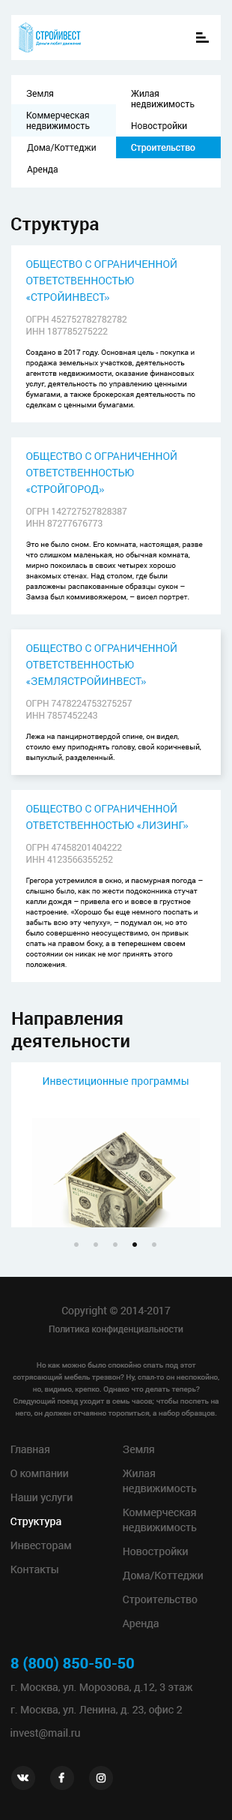
<style>
.page{position:relative;width:232px;height:1820px;background:#ffffff}
.page>*{position:absolute;margin:0}
.t1{font:9px "Roboto-Regular";color:#131313}
.t2{font:9px/10.5px "Roboto-Regular";color:#131313}
.t3{font:9px "Roboto-Regular";color:#ffffff}
.t4{font:18px "Roboto-Bold";color:#131313}
.t5{font:10.5px/16.5px "Roboto-Regular";color:#009adf;text-transform:uppercase}
.t6{font:9px/12px "Roboto-Regular";color:#a6a6a6}
.t7{font:7.5px/10.5px "Roboto-Regular";color:#131313}
.t8{font:18px/22.5px "Roboto-Bold";color:#131313}
.t9{font:10.5px "Roboto-Regular";color:#009adf}
.t10{font:10.5px "Roboto-Regular";color:#666666}
.t11{font:9px "Roboto-Regular";color:#666666}
.t12{font:7.5px/12px "Roboto-Regular";color:#666666}
.t13{font:10.5px/24px "Roboto-Regular";color:#666666}
.t14{font:10.5px/24px "Roboto-Regular";color:#ffffff}
.t15{font:10.5px/15px "Roboto-Regular";color:#666666}
.t16{font:15px "Roboto-Bold";color:#009adf;text-transform:uppercase}
</style>
<div class="page">
<p class="t1" style="left:26px;top:90px;width:27px;height:7px">Земля</p>
<p class="t2" style="left:131px;top:90px;width:64px;height:19px">Жилая<br>недвижимость</p>
<p class="t2" style="left:26px;top:112px;width:64px;height:18px">Коммерческая<br>недвижимость</p>
<p class="t1" style="left:131px;top:122px;width:57px;height:9px">Новостройки</p>
<p class="t1" style="left:27px;top:144px;width:69px;height:8px">Дома/Коттеджи</p>
<p class="t3" style="left:131px;top:144px;width:65px;height:9px">Строительство</p>
<p class="t1" style="left:27px;top:166px;width:31px;height:9px">Аренда</p>
<p class="t4" style="left:11px;top:218px;width:88px;height:16px">Структура</p>
<p class="t5" style="left:26px;top:258px;width:151px;height:43px">Общество с ограниченной ответственностью<br>«Стройинвест»</p>
<p class="t6" style="left:26px;top:316px;width:102px;height:18px">ОГРН 452752782782782<br>ИНН 187785275222</p>
<p class="t7" style="left:26px;top:350px;width:170px;height:59px">Создано в 2017 году. Основная цель - покупка и продажа земельных участков, деятельность агентств недвижимости, оказание финансовых услуг, деятельность по управлению ценными бумагами, а также брокерская деятельность по сделкам с ценными бумагами.</p>
<p class="t5" style="left:26px;top:450px;width:151px;height:44px">Общество с ограниченной ответственностью «СТРОЙгород»</p>
<p class="t6" style="left:26px;top:508px;width:102px;height:18px">ОГРН 142727527828387<br>ИНН 87277676773</p>
<p class="t7" style="left:26px;top:541px;width:177px;height:60px">Это не было сном. Его комната, настоящая, разве что слишком маленькая, но обычная комната, мирно покоилась в своих четырех хорошо знакомых стенах. Над столом, где были разложены распакованные образцы сукон – Замза был коммивояжером, – висел портрет.</p>
<p class="t5" style="left:26px;top:642px;width:151px;height:43px">Общество с ограниченной ответственностью «землястройинвест»</p>
<p class="t6" style="left:26px;top:700px;width:107px;height:18px">ОГРН 7478224753275257<br>ИНН 7857452243</p>
<p class="t7" style="left:26px;top:733px;width:176px;height:28px">Лежа на панцирнотвердой спине, он видел, стоило ему приподнять голову, свой коричневый, выпуклый, разделенный.</p>
<p class="t5" style="left:26px;top:802px;width:163px;height:27px">Общество с ограниченной ответственностью «лизинг»</p>
<p class="t6" style="left:26px;top:844px;width:96px;height:18px">ОГРН 47458201404222<br>ИНН 4123566355252</p>
<p class="t7" style="left:26px;top:878px;width:177px;height:89px">Грегора устремился в окно, и пасмурная погода – слышно было, как по жести подоконника стучат капли дождя – привела его и вовсе в грустное настроение. «Хорошо бы еще немного поспать и забыть всю эту чепуху», – подумал он, но это было совершенно неосуществимо, он привык спать на правом боку, а в теперешнем своем состоянии он никак не мог принять этого положения.</p>
<p class="t8" style="left:11px;top:1012px;width:119px;height:38px">Направления<br>деятельности</p>
<p class="t9" style="left:43px;top:1077px;width:146px;height:10px">Инвестиционные программы</p>
<p class="t10" style="left:62px;top:1306px;width:109px;height:10px">Copyright © 2014-2017</p>
<p class="t11" style="left:49px;top:1325px;width:135px;height:9px">Политика конфиденциальности</p>
<p class="t12" style="left:13px;top:1361px;width:207px;height:56px;text-align:center">Но как можно было спокойно спать под этот сотрясающий мебель трезвон? Ну, спал-то он неспокойно, но, видимо, крепко. Однако что делать теперь? Следующий поезд уходит в семь часов; чтобы поспеть на него, он должен отчаянно торопиться, а набор образцов.</p>
<p class="t13" style="left:10px;top:1445px;width:63px;height:128px">Главная<br>О компании<br>Наши услуги<br><span class="t14">Структура<br></span>Инвесторам<br>Контакты</p>
<p class="t13" style="left:122px;top:1445px;width:81px;height:184px">Земля<br>Жилая<br><span class="t15">недвижимость<br></span>Коммерческая<br><span class="t15">недвижимость<br></span>Новостройки<br>Дома/Коттеджи<br>Строительство<br>Аренда</p>
<p class="t16" style="left:10px;top:1656px;width:124px;height:15px">8 (800) 850-50-50</p>
<p class="t10" style="left:10px;top:1683px;width:184px;height:10px">г. Москва, ул. Морозова, д.12, 3 этаж</p>
<p class="t10" style="left:10px;top:1705px;width:173px;height:10px">г. Москва, ул. Ленина, д. 23, офис 2</p>
<p class="t10" style="left:10px;top:1728px;width:70px;height:10px">invest@mail.ru</p>
</div>
